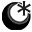
<style>
.page{position:relative;width:32px;height:32px;background:#ffffff}
.page>*{position:absolute;margin:0}
.t1{font:30px "MS-Gothic";color:#1e1e1e}
</style>
<div class="page">
<p class="t1" style="left:17px;top:1px;width:14px;height:15px">*</p>
</div>
